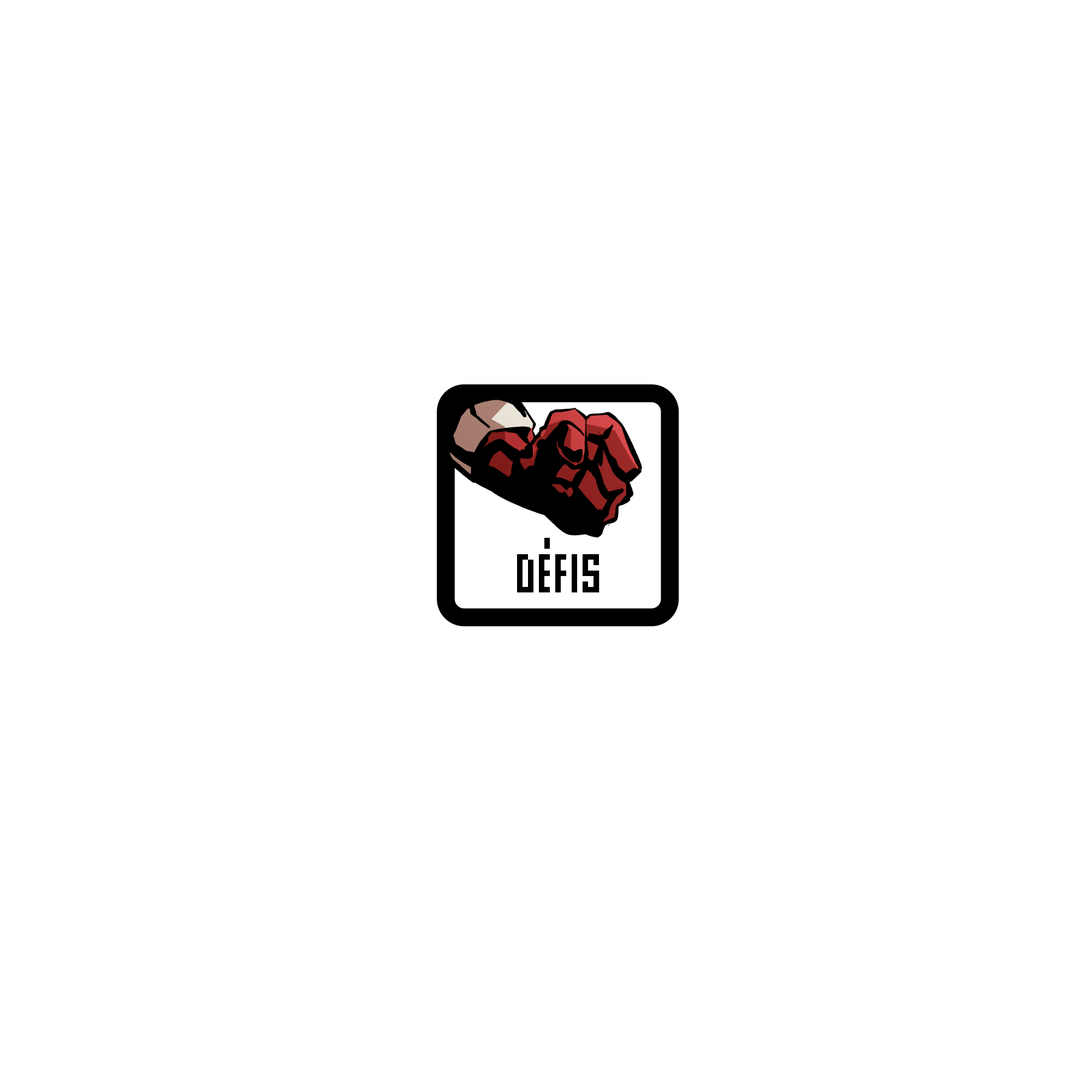
<style>
.page{position:relative;width:1092px;height:1092px;background:#ffffff}
.page>*{position:absolute;margin:0}
.t1{font:54.6px "pxl";color:#000000}
</style>
<div class="page">
<p class="t1" style="left:517px;top:538px;width:83px;height:54px">DÉFIS</p>
</div>
